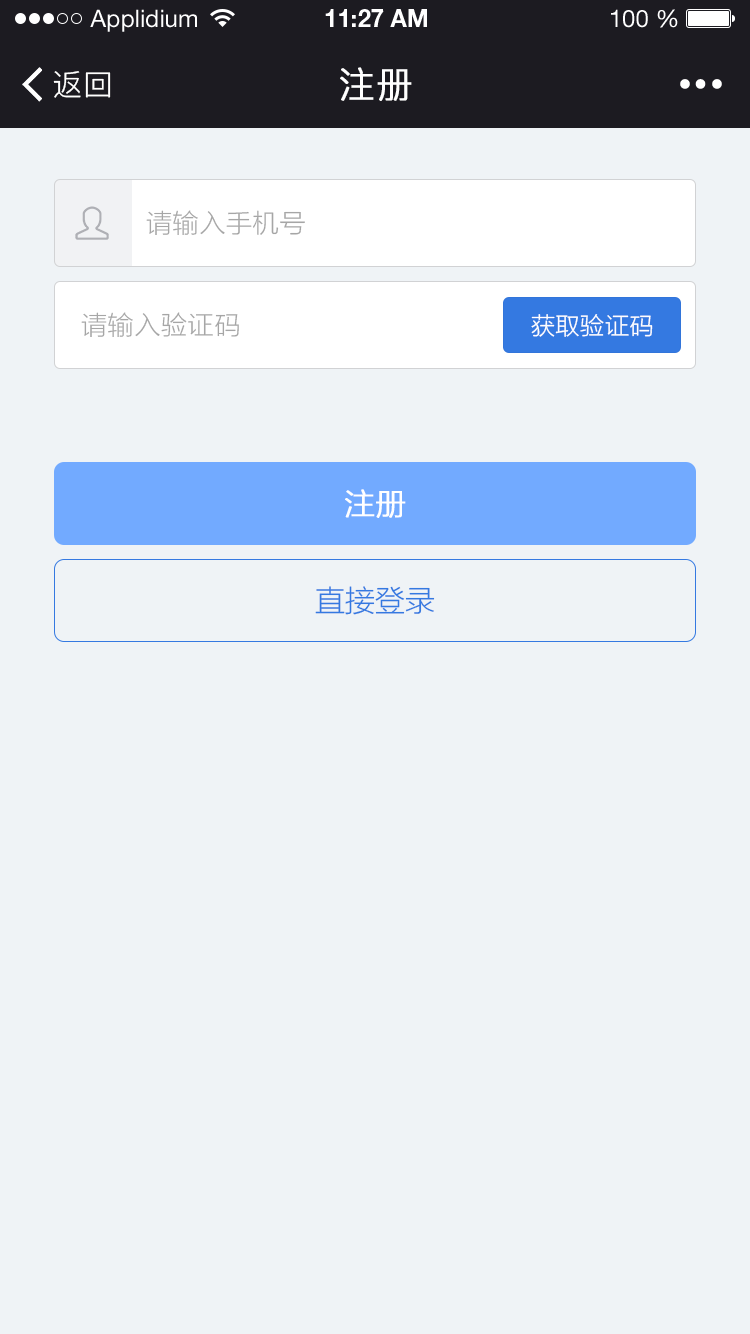
<style>
.page{position:relative;width:750px;height:1334px;background:#eff3f6}
.page>*{position:absolute;margin:0}
.t1{font:24px "HelveticaNeueLTStd-Roman";color:#ffffff}
.t2{font:24px "HelveticaNeueLTStd-Bd";color:#ffffff}
.t3{font:30px "PingFang-SC-Regular";letter-spacing:0.025em;color:#ffffff}
.t4{font:36px "PingFang-SC-Regular";letter-spacing:0.025em;color:#ffffff;font-weight:bold}
.t5{font:26px "FZLTXHK--GBK1-0";letter-spacing:0.025em;color:#a6a6a6}
.t6{font:24px "FZLTXHK--GBK1-0";letter-spacing:0.025em;color:#ffffff}
.t7{font:30px "FZLTXHK--GBK1-0";color:#ffffff;font-weight:bold}
.t8{font:30px "FZLTXHK--GBK1-0";color:#3479e1}
</style>
<div class="page">
<p class="t1" style="left:90px;top:9px;width:107px;height:23px">Applidium</p>
<p class="t2" style="left:325px;top:9px;width:102px;height:18px">11:27 AM</p>
<p class="t1" style="left:611px;top:9px;width:67px;height:19px">100 %</p>
<p class="t3" style="left:53px;top:71px;width:58px;height:27px">返回</p>
<p class="t4" style="left:340px;top:67px;width:72px;height:34px">注册</p>
<p class="t5" style="left:146px;top:210px;width:159px;height:25px">请输入手机号</p>
<p class="t5" style="left:81px;top:312px;width:158px;height:25px">请输入验证码</p>
<p class="t6" style="left:531px;top:314px;width:122px;height:23px">获取验证码</p>
<p class="t7" style="left:345px;top:489px;width:61px;height:29px">注册</p>
<p class="t8" style="left:315px;top:586px;width:120px;height:29px">直接登录</p>
</div>
